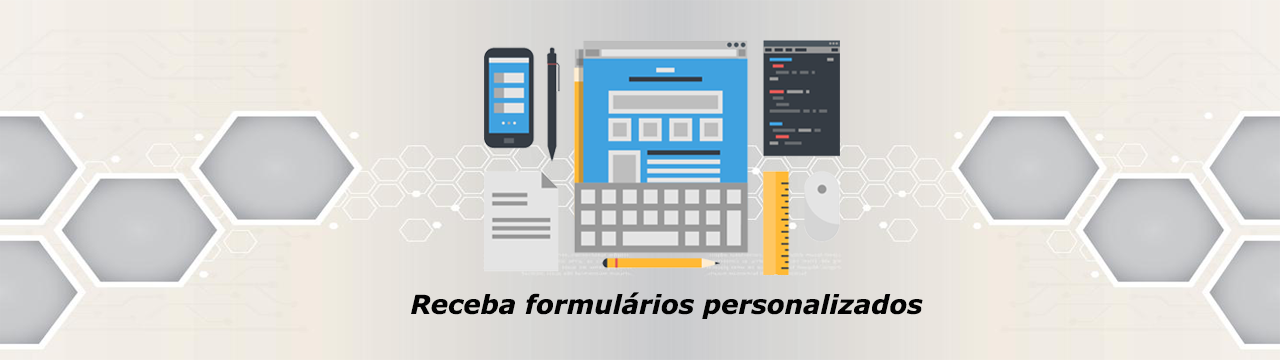
<style>
.page{position:relative;width:1280px;height:360px}
.page>*{position:absolute;margin:0}
.t1{font:26px "Verdana-BoldItalic";color:#020202}
</style>
<div class="page">
<p class="t1" style="left:411px;top:292px;width:512px;height:27px">Receba formulários personalizados</p>
</div>
